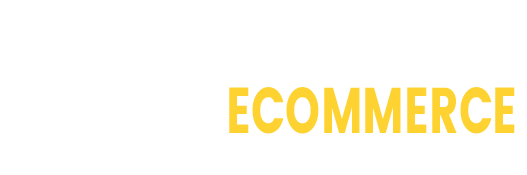
<style>
.page{position:relative;width:527px;height:175px;background:#ffffff}
.page>*{position:absolute;margin:0}
.t1{font:64.6px "Poppins";color:#fed230;scale:0.69 1}
.t2{font:64.6px "Poppins";color:#ffffff;scale:0.69 1}
</style>
<div class="page">
<p class="t1" style="left:132px;top:87px;width:383px;height:47px"><span class="t2">MY-</span>ECOMMERCE</p>
</div>
